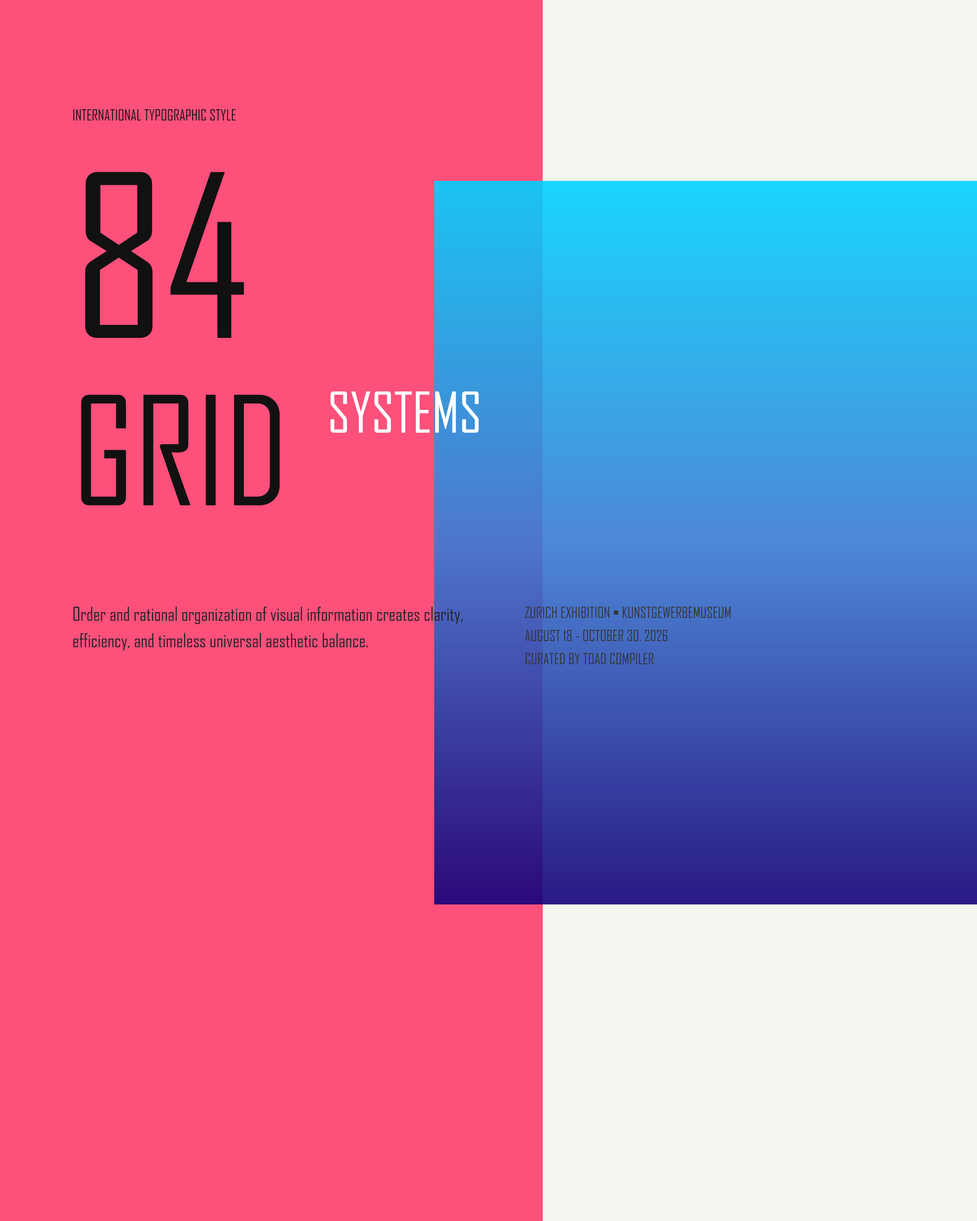
<style>
.page{position:relative;width:977px;height:1221px;background:#fd507b}
.page>*{position:absolute;margin:0}
.t1{font:14.5px "DisplayType-Bold";letter-spacing:0.125em;color:#111111}
.t2{font:217px "DisplayType-Black";color:#111111}
.t3{font:144.7px "DisplayType-Black";color:#111111}
.t4{font:54.3px "DisplayType-Light";color:#ffffff}
.t5{font:18.1px "DisplayType-Regular";color:#222222}
.t6{font:14.5px "DisplayType-SemiBold";color:#333333}
</style>
<div class="page">
<p class="t1" style="left:72px;top:109px;width:235px;height:18px">INTERNATIONAL TYPOGRAPHIC STYLE</p>
<p class="t2" style="left:72px;top:163px;width:201px;height:217px">84</p>
<p class="t3" style="left:72px;top:389px;width:234px;height:145px">GRID</p>
<p class="t4" style="left:327px;top:389px;width:155px;height:68px">SYSTEMS</p>
<p class="t5" style="left:72px;top:606px;width:398px;height:398px">Order and rational organization of visual information creates clarity,<br>efficiency, and timeless universal aesthetic balance.</p>
<p class="t6" style="left:525px;top:606px;width:361px;height:362px">ZURICH EXHIBITION • KUNSTGEWERBEMUSEUM<br>AUGUST 18 - OCTOBER 30, 2026<br>CURATED BY TOAD COMPILER</p>
</div>
